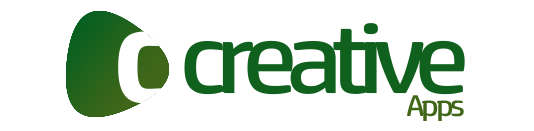
<style>
.page{position:relative;width:534px;height:131px;background:#ffffff}
.page>*{position:absolute;margin:0}
.t1{font:100px "HPSimplified-Regular";letter-spacing:-0.1em;color:#11611e;scale:1.13 1}
.t2{font:30px "HPSimplified-Regular";letter-spacing:-0.1em;color:#406618;scale:1.13 1}
</style>
<div class="page">
<p class="t1" style="left:184px;top:23px;width:281px;height:72px">creative</p>
<p class="t2" style="left:407px;top:95px;width:57px;height:26px">Apps</p>
</div>
